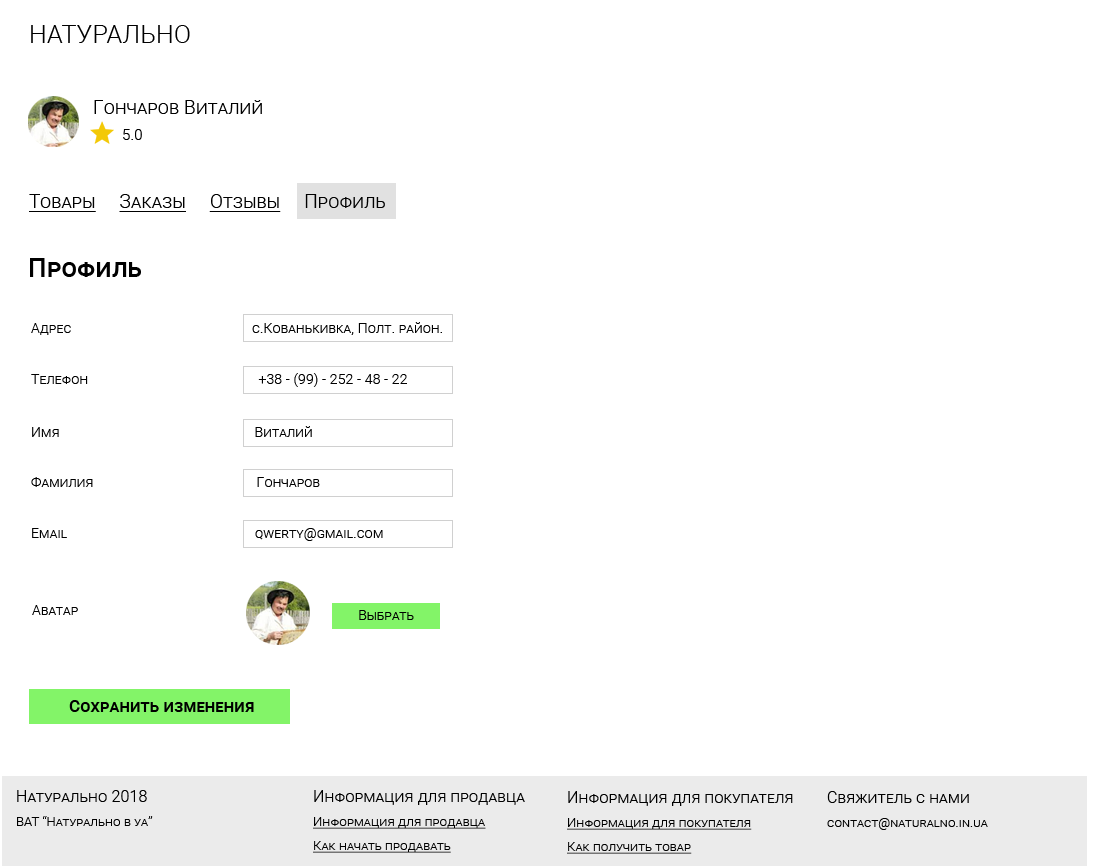
<style>
.page{position:relative;width:1100px;height:866px;background:#ffffff}
.page>*{position:absolute;margin:0}
.t1{font:25px "Roboto-Light";letter-spacing:0.01em;color:#000000;font-variant:small-caps}
.t2{font:19px "Roboto-Light";letter-spacing:0.01em;color:#000000;font-variant:small-caps}
.t3{font:15px "Roboto-Light";letter-spacing:0.01em;color:#000000;font-variant:small-caps}
.t4{font:19px "Roboto-Light";letter-spacing:0.01em;color:#000000;font-variant:small-caps;text-decoration:underline}
.t5{font:26px "Roboto-Medium";letter-spacing:0.01em;color:#000000;font-variant:small-caps}
.t6{font:14px "Roboto-Light";letter-spacing:0.01em;color:#000000;font-variant:small-caps}
.t7{font:17px "Roboto-Medium";letter-spacing:0.01em;color:#000000;font-variant:small-caps}
.t8{font:13px/24px "Roboto-Light";letter-spacing:0.01em;color:#000000;font-variant:small-caps}
.t9{font:16px/26px "Roboto-Light";letter-spacing:0.01em;color:#000000;font-variant:small-caps}
.t10{font:13px/24px "Roboto-Light";letter-spacing:0.01em;color:#000000;font-variant:small-caps;text-decoration:underline}
</style>
<div class="page">
<p class="t1" style="left:31px;top:25px;width:159px;height:18px">НАТУРАЛЬНО</p>
<p class="t2" style="left:94px;top:100px;width:168px;height:14px">Гончаров Виталий</p>
<p class="t3" style="left:123px;top:129px;width:19px;height:11px">5.0</p>
<p class="t4" style="left:29px;top:194px;width:356px;height:18px">Товары     Заказы     Отзывы<span class="t2">     Профиль</span></p>
<p class="t5" style="left:30px;top:258px;width:111px;height:19px">Профиль</p>
<p class="t6" style="left:31px;top:322px;width:411px;height:13px">Адрес                                                   с.Кованькивка, Полт. район.</p>
<p class="t6" style="left:31px;top:373px;width:376px;height:14px">Телефон                                                +38 - (99) - 252 - 48 - 22</p>
<p class="t6" style="left:32px;top:426px;width:280px;height:11px">Имя                                                       Виталий</p>
<p class="t6" style="left:31px;top:477px;width:289px;height:10px">Фамилия                                              Гончаров</p>
<p class="t6" style="left:32px;top:528px;width:351px;height:13px">Email                                                     qwerty@gmail.com</p>
<p class="t6" style="left:32px;top:605px;width:46px;height:10px">Аватар</p>
<p class="t6" style="left:359px;top:610px;width:55px;height:10px">Выбрать</p>
<p class="t7" style="left:69px;top:700px;width:185px;height:12px">Сохранить изменения</p>
<p class="t8" style="left:17px;top:790px;width:136px;height:36px"><span class="t9">Натурально 2018<br></span>ВАТ “Натурально в уа”</p>
<p class="t10" style="left:313px;top:790px;width:212px;height:63px"><span class="t9">Информация для продавца<br></span>Информация для продавца<br>Как начать продавать</p>
<p class="t10" style="left:567px;top:791px;width:226px;height:63px"><span class="t9">Информация для покупателя<br></span>Информация для покупателя<br>Как получить товар</p>
<p class="t8" style="left:827px;top:791px;width:161px;height:39px"><span class="t9">Свяжитель с нами<br></span>contact@naturalno.in.ua</p>
</div>
